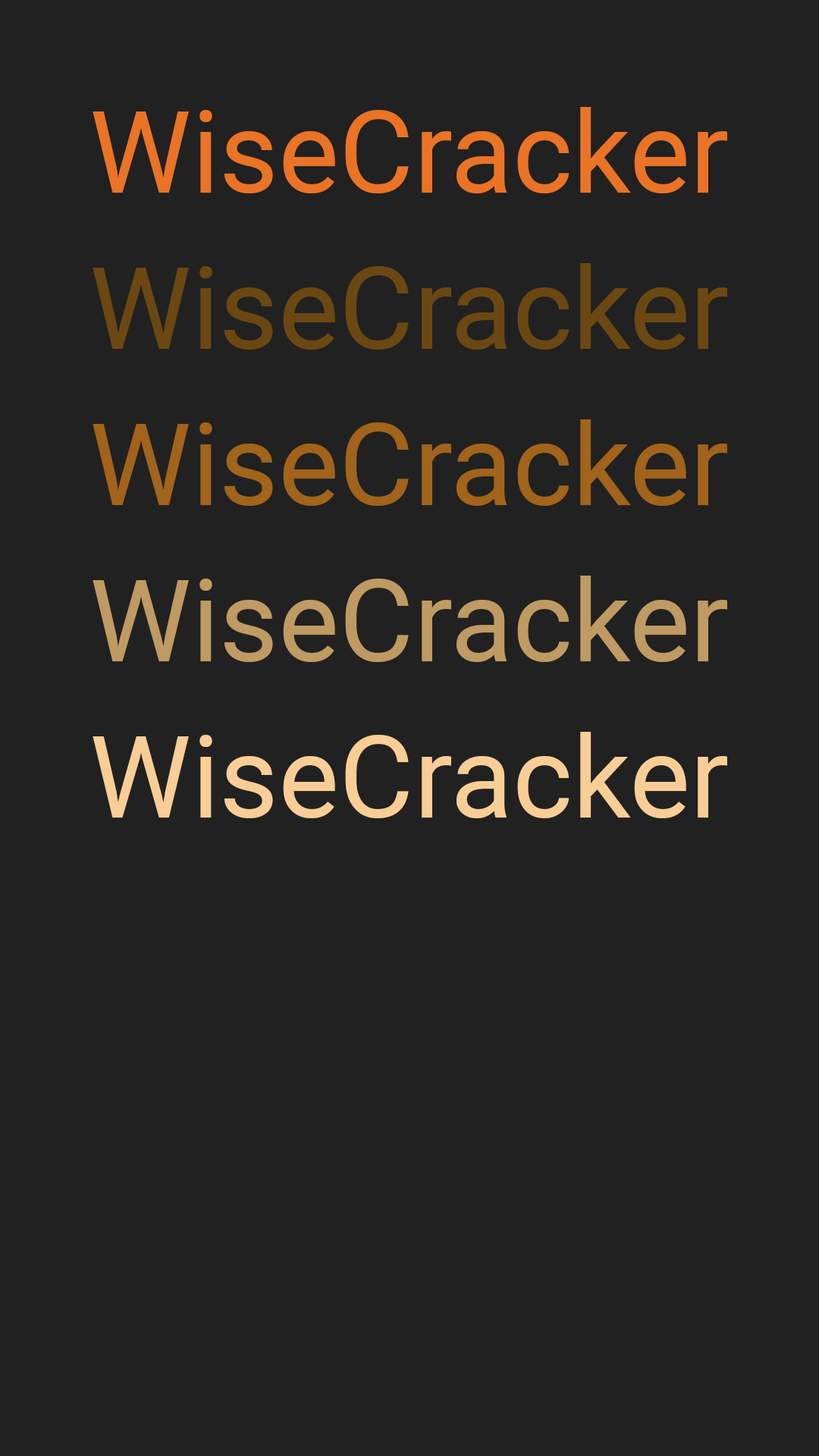
<style>
.page{position:relative;width:819px;height:1456px;background:#212121}
.page>*{position:absolute;margin:0}
.t1{font:114.6px "Roboto-Regular";color:#ea7326}
.t2{font:114.6px "Roboto-Regular";color:#6b4812}
.t3{font:114.6px "Roboto-Regular";color:#a2631b}
.t4{font:114.6px "Roboto-Regular";color:#bf9a62}
.t5{font:114.6px "Roboto-Regular";color:#f8ce96}
</style>
<div class="page">
<p class="t1" style="left:93px;top:107px;width:634px;height:86px">WiseCracker</p>
<p class="t2" style="left:93px;top:263px;width:634px;height:87px">WiseCracker</p>
<p class="t3" style="left:93px;top:419px;width:634px;height:87px">WiseCracker</p>
<p class="t4" style="left:93px;top:576px;width:634px;height:86px">WiseCracker</p>
<p class="t5" style="left:93px;top:732px;width:634px;height:86px">WiseCracker</p>
</div>
